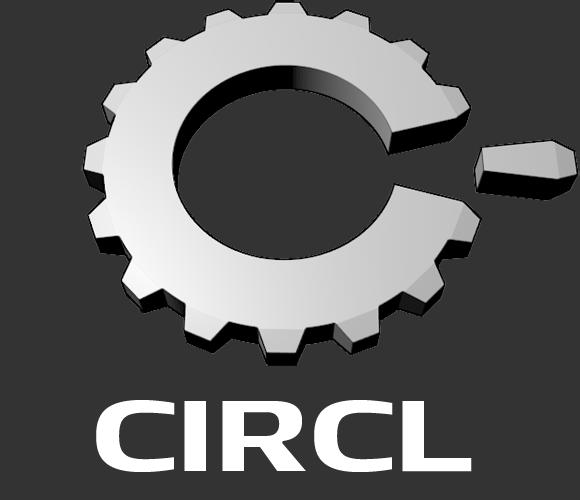
<style>
.page{position:relative;width:580px;height:500px;background:#333333}
.page>*{position:absolute;margin:0}
.t1{font:100px "SignaExtColumn-Bold";color:#ffffff}
</style>
<div class="page">
<p class="t1" style="left:96px;top:400px;width:376px;height:72px">CIRCL</p>
</div>
